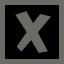
<style>
.page{position:relative;width:64px;height:64px;background:#000000}
.page>*{position:absolute;margin:0}
.t1{font:60px "CIKANDEI";color:#6b6a65}
</style>
<div class="page">
<p class="t1" style="left:15px;top:11px;width:36px;height:42px">X</p>
</div>
